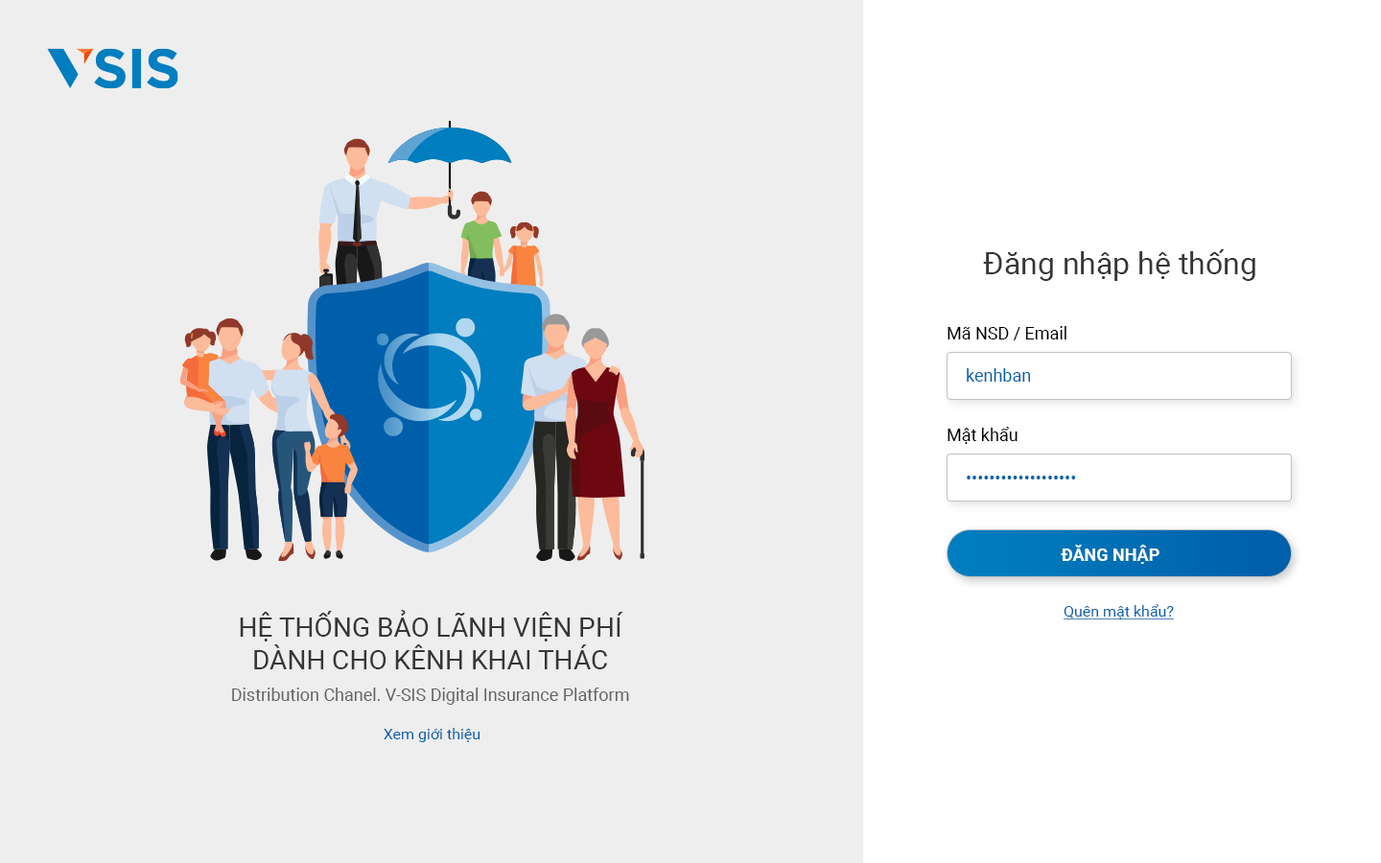
<style>
.page{position:relative;width:1381px;height:863px;background:#eeeeee}
.page>*{position:absolute;margin:0}
.t1{font:30.7px "Roboto-Regular";color:#363636}
.t2{font:17.3px "Roboto-Regular";color:#000000}
.t3{font:17.3px "Roboto-Regular";color:#0062ac}
.t4{font:17.3px "Roboto-Bold";color:#ffffff;text-transform:uppercase}
.t5{font:15.3px "Roboto-Regular";color:#005faa;text-decoration:underline}
.t6{font:17.3px "Roboto-Regular";color:#636363}
.t7{font:26.9px "Roboto-Regular";color:#363636}
.t8{font:15.3px "Roboto-Regular";color:#005faa}
</style>
<div class="page">
<p class="t1" style="left:983px;top:249px;width:273px;height:32px">Đăng nhập hệ thống</p>
<p class="t2" style="left:948px;top:326px;width:119px;height:15px">Mã NSD / Email</p>
<p class="t3" style="left:967px;top:368px;width:64px;height:14px">kenhban</p>
<p class="t2" style="left:948px;top:427px;width:70px;height:17px">Mật khẩu</p>
<p class="t3" style="left:967px;top:476px;width:109px;height:4px">•••••••••••••••••••</p>
<p class="t4" style="left:1061px;top:545px;width:99px;height:19px">Đăng nhập</p>
<p class="t5" style="left:1063px;top:604px;width:111px;height:16px">Quên mật khẩu?</p>
<p class="t6" style="left:232px;top:610px;width:397px;height:95px;text-align:center"><span class="t7">HỆ THỐNG BẢO LÃNH VIỆN PHÍ<br>DÀNH CHO KÊNH KHAI THÁC<br></span>Distribution Chanel. V-SIS Digital Insurance Platform</p>
<p class="t8" style="left:384px;top:728px;width:97px;height:14px">Xem giới thiệu</p>
</div>
